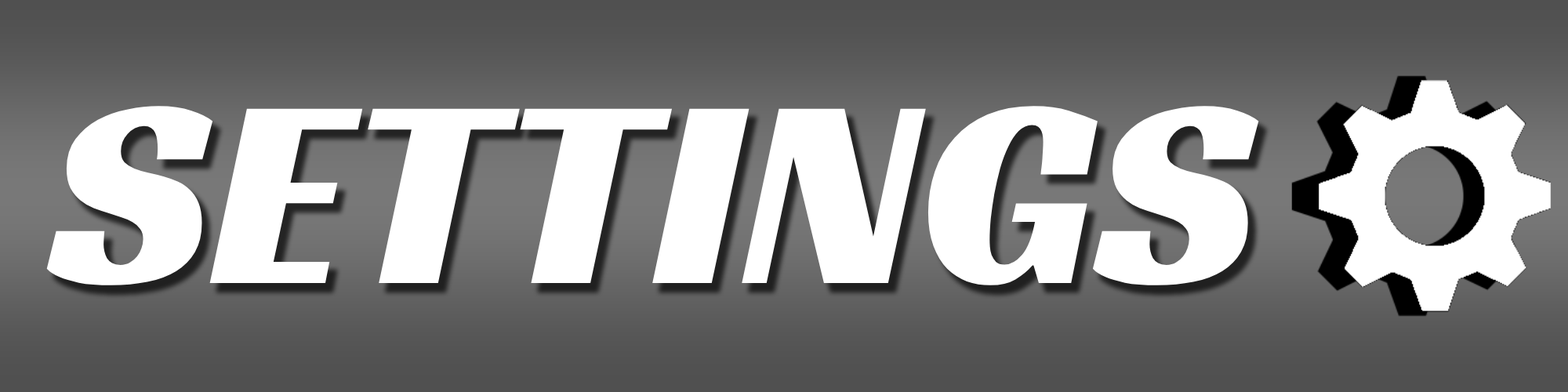
<style>
.page{position:relative;width:1568px;height:392px;background:#ffffff}
.page>*{position:absolute;margin:0}
.t1{font:274.4px "RacingSansOne-Regular";color:#ffffff}
</style>
<div class="page">
<p class="t1" style="left:46px;top:106px;width:1213px;height:179px">SETTINGS</p>
</div>
